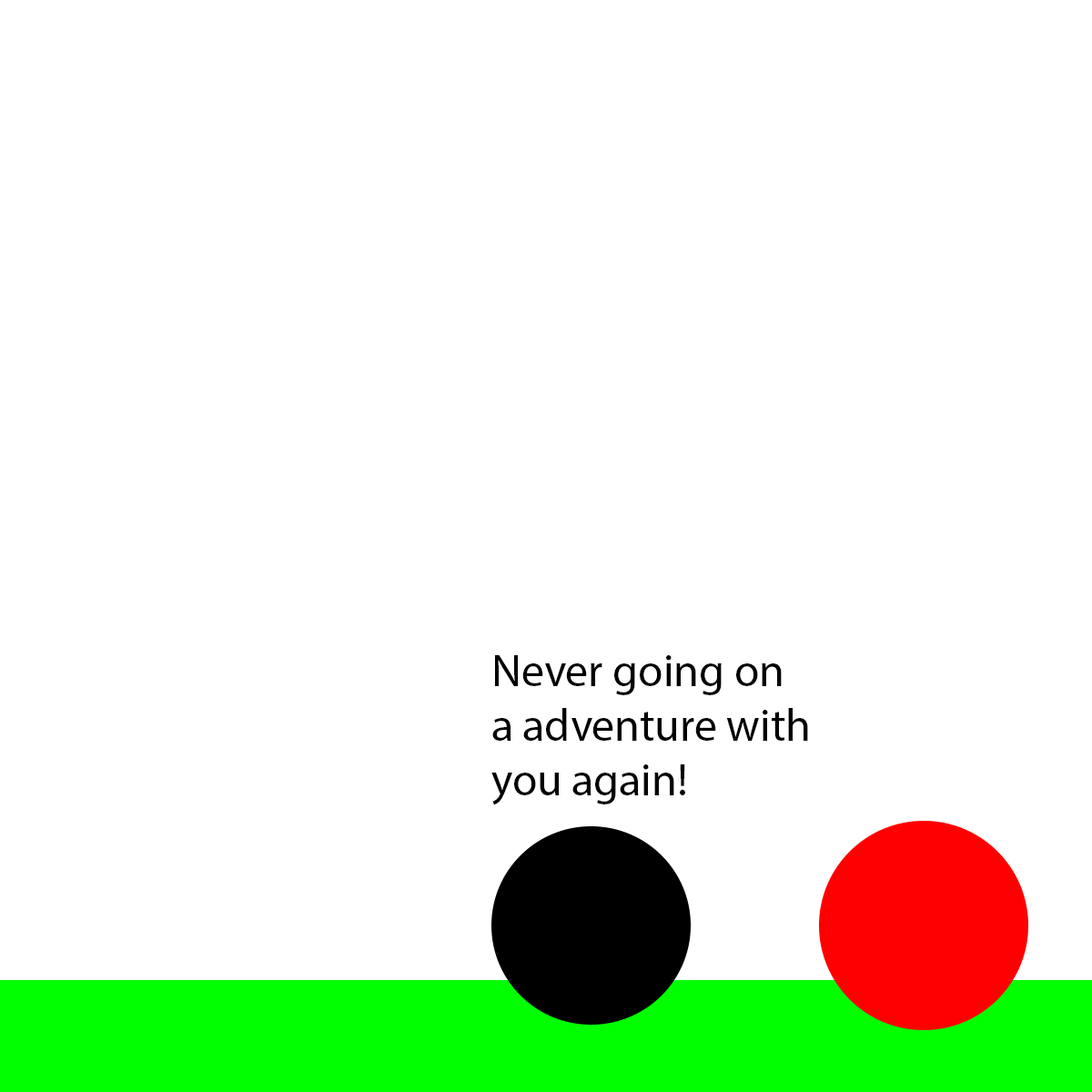
<style>
.page{position:relative;width:1092px;height:1092px;background:#ffffff}
.page>*{position:absolute;margin:0}
.t1{font:45.5px "MyriadPro-Regular";color:#000000}
</style>
<div class="page">
<p class="t1" style="left:491px;top:655px;width:317px;height:150px">Never going on <br>a adventure with <br>you again!</p>
</div>
